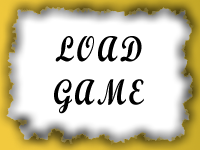
<style>
.page{position:relative;width:200px;height:150px;background:#ffffff}
.page>*{position:absolute;margin:0}
.t1{font:36px "ScriptMTBold";letter-spacing:0.08em;color:#000000;scale:0.8 1}
</style>
<div class="page">
<p class="t1" style="left:54px;top:36px;width:90px;height:78px;text-align:center">LOAD<br>GAME</p>
</div>
